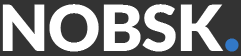
<style>
.page{position:relative;width:241px;height:56px;background:#333333}
.page>*{position:absolute;margin:0}
.t1{font:64px "Lato-Black";color:#ffffff}
.t2{font:74.6px "Lato-Black";color:#3278c7}
</style>
<div class="page">
<p class="t1" style="left:2px;top:4px;width:237px;height:48px">NOBSK<span class="t2">.</span></p>
</div>
